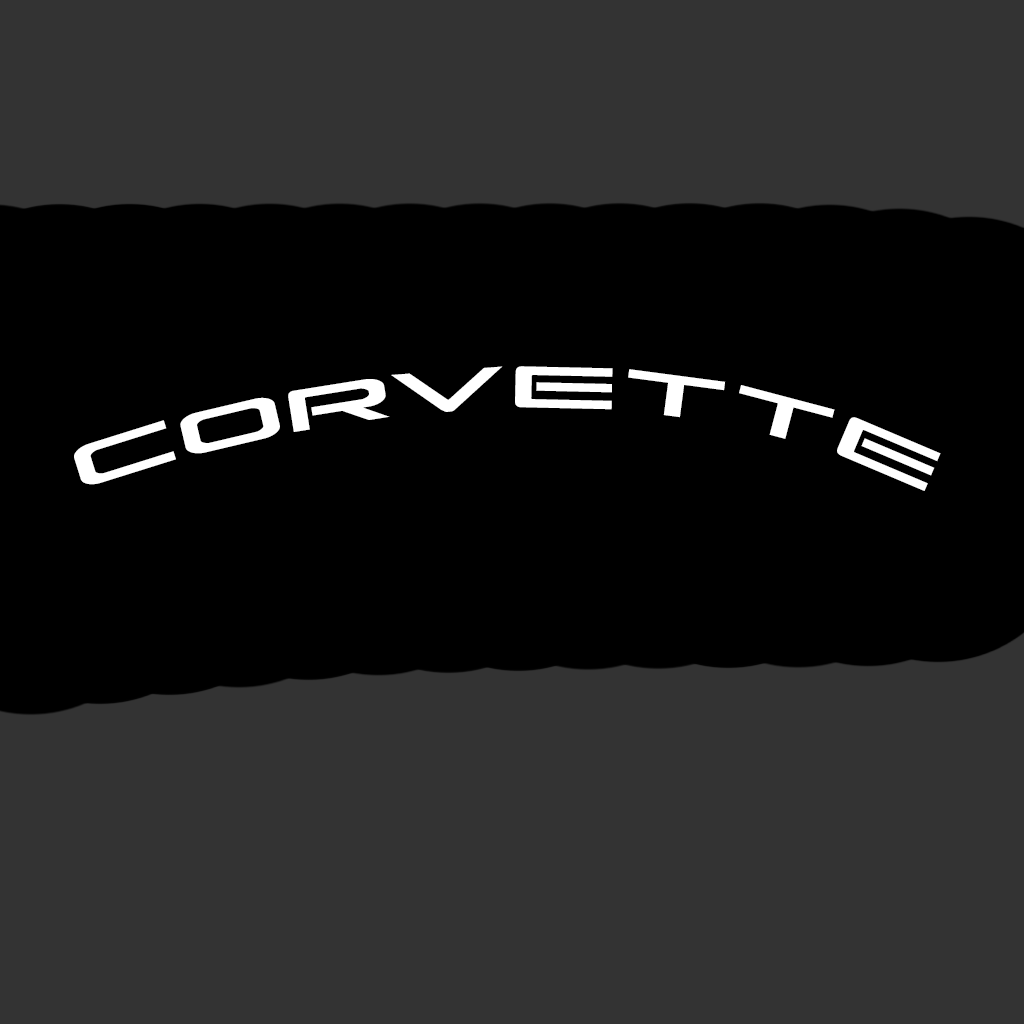
<style>
.page{position:relative;width:1024px;height:1024px;background:#333333}
.page>*{position:absolute;margin:0}
.t1{font:95px "GrandSport";color:#ffffff}
</style>
<div class="page">
<p class="t1" style="left:74px;top:366px;width:867px;height:125px">CORVETTE</p>
</div>
